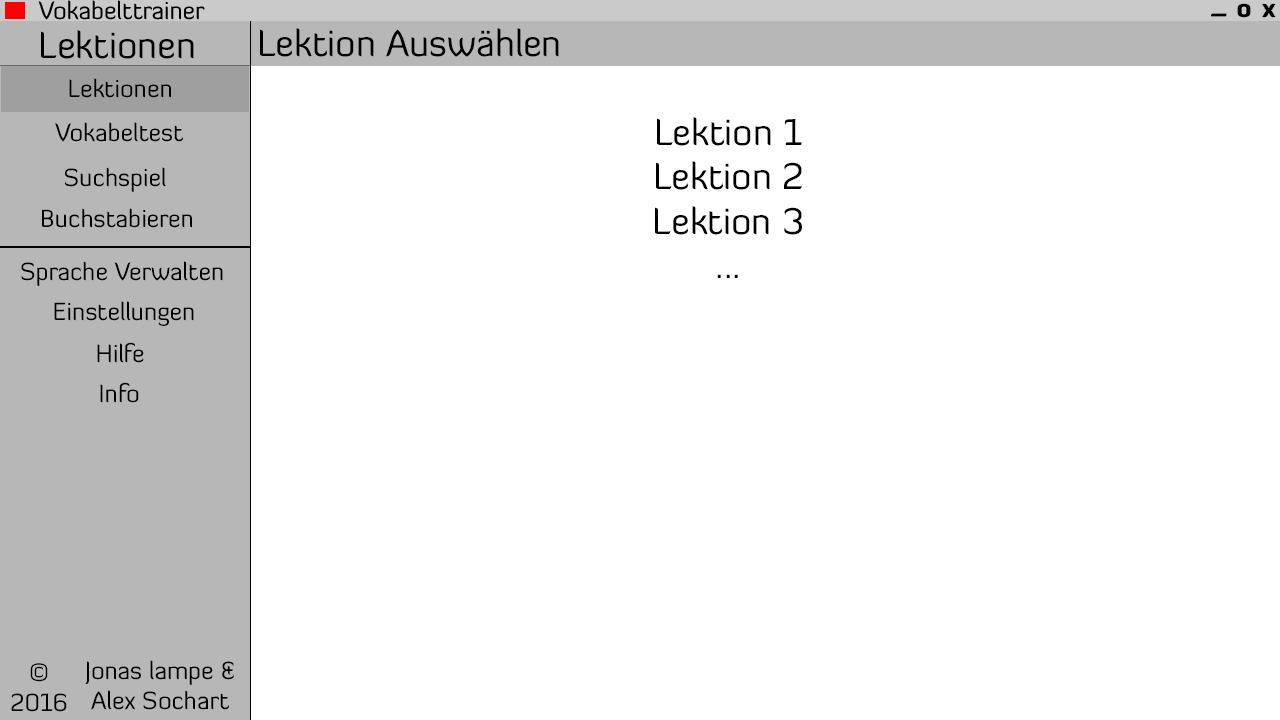
<style>
.page{position:relative;width:1280px;height:720px;background:#ffffff}
.page>*{position:absolute;margin:0}
.t1{font:24.6px "DiavloBlack-Regular";color:#000000}
.t2{font:36.9px "DiavloBook-Regular";color:#000000}
.t3{font:24.6px "DiavloBook-Regular";color:#000000}
</style>
<div class="page">
<p class="t1" style="left:1237px;top:3px;width:14px;height:15px">o</p>
<p class="t1" style="left:1262px;top:3px;width:14px;height:15px">x</p>
<p class="t1" style="left:1211px;top:13px;width:16px;height:4px">_</p>
<p class="t2" style="left:41px;top:30px;width:153px;height:29px">Lektionen</p>
<p class="t2" style="left:260px;top:28px;width:299px;height:29px">Lektion Auswählen</p>
<p class="t3" style="left:69px;top:78px;width:102px;height:20px">Lektionen</p>
<p class="t3" style="left:55px;top:122px;width:128px;height:20px">Vokabeltest</p>
<p class="t2" style="left:655px;top:117px;width:147px;height:161px;text-align:center">Lektion 1<br>Lektion 2<br>Lektion 3<br>...</p>
<p class="t3" style="left:65px;top:167px;width:102px;height:25px">Suchspiel</p>
<p class="t3" style="left:42px;top:208px;width:150px;height:20px">Buchstabieren</p>
<p class="t3" style="left:21px;top:261px;width:202px;height:25px">Sprache Verwalten</p>
<p class="t3" style="left:54px;top:301px;width:140px;height:25px">Einstellungen</p>
<p class="t3" style="left:97px;top:342px;width:47px;height:21px">Hilfe</p>
<p class="t3" style="left:100px;top:382px;width:39px;height:21px">Info</p>
<p class="t3" style="left:11px;top:663px;width:56px;height:49px;text-align:center">©<br>2016</p>
<p class="t3" style="left:85px;top:660px;width:149px;height:50px;text-align:center">Jonas lampe &amp;<br>Alex Sochart</p>
</div>
